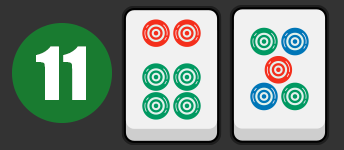
<style>
.page{position:relative;width:344px;height:150px;background:#333333}
.page>*{position:absolute;margin:0}
.t1{font:66.7px "Impact";color:#ffffff;font-weight:bold}
</style>
<div class="page">
<p class="t1" style="left:36px;top:46px;width:50px;height:54px">11</p>
</div>
